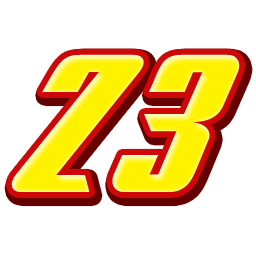
<style>
.page{position:relative;width:256px;height:256px;background:#ffffff}
.page>*{position:absolute;margin:0}
.t1{font:208.4px "FlyboyBB";color:#fff200}
</style>
<div class="page">
<p class="t1" style="left:11px;top:54px;width:229px;height:138px">23</p>
</div>
